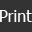
<style>
.page{position:relative;width:32px;height:32px;background:#333333}
.page>*{position:absolute;margin:0}
.t1{font:16px "Tahoma";color:#ffffff}
</style>
<div class="page">
<p class="t1" style="left:0px;top:10px;width:32px;height:12px">Print</p>
</div>
